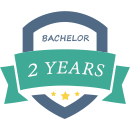
<style>
.page{position:relative;width:130px;height:130px;background:#ffffff}
.page>*{position:absolute;margin:0}
.t1{font:7.9px "SegoePrint-Bold";letter-spacing:0.025em;color:#506a85}
.t2{font:19.7px "AdobeDevanagari-Italic";letter-spacing:0.025em;color:#ffffff}
.t3{font:23.7px "AdobeDevanagari-Italic";letter-spacing:0.025em;color:#ffffff}
</style>
<div class="page">
<p class="t1" style="left:42px;top:34px;width:48px;height:8px">BACHELOR</p>
<p class="t2" style="left:28px;top:61px;width:77px;height:16px"><span class="t3">2</span> YEARS</p>
</div>
